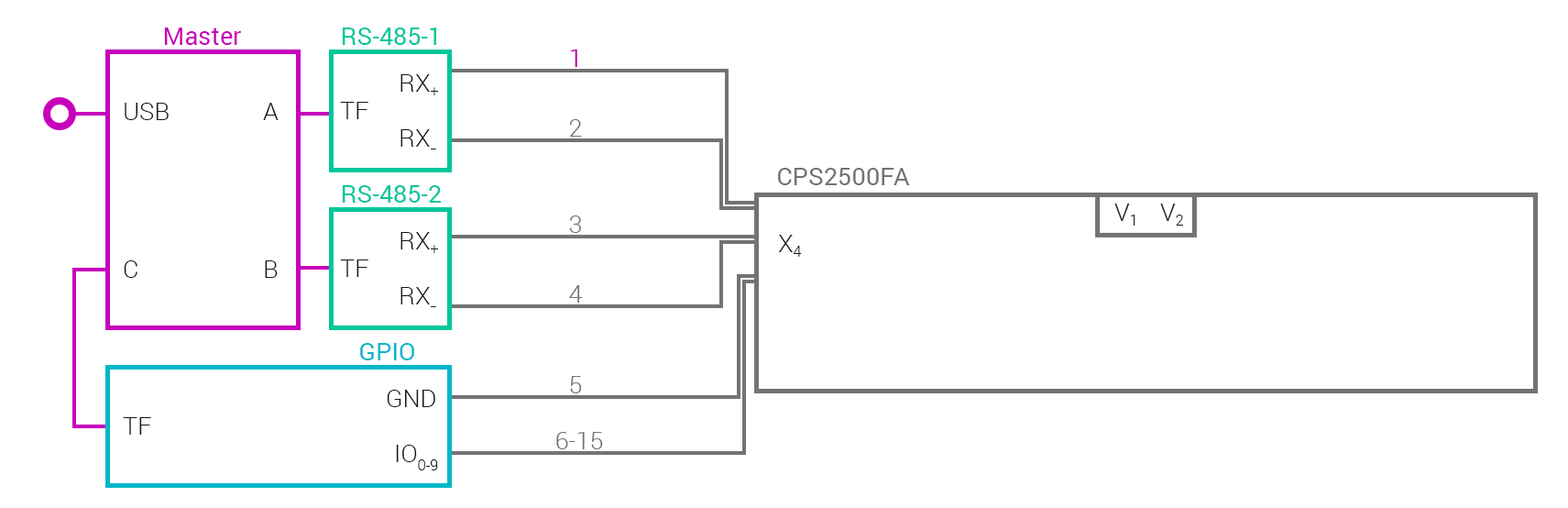
<style>
.page{position:relative;width:1568px;height:508px;background:#ffffff}
.page>*{position:absolute;margin:0}
.t1{font:24.9px "Roboto-Regular";color:#c700bb}
.t2{font:24.9px "Roboto-Regular";color:#00c79b}
.t3{font:24.9px "Roboto-Light";color:#c700bb}
.t4{font:24.8px "Roboto-Light";color:#181818}
.t5{font:24.9px "Roboto-Light";color:#737373}
.t6{font:38.2px "Roboto-Light";color:#181818}
.t7{font:24.9px "Roboto-Regular";color:#737373}
.t8{font:24.9px "Roboto-Regular";color:#01b7c7}
</style>
<div class="page">
<p class="t1" style="left:164px;top:27px;width:77px;height:18px">Master</p>
<p class="t2" style="left:342px;top:27px;width:94px;height:18px">RS-485-1</p>
<p class="t3" style="left:570px;top:49px;width:7px;height:18px">1</p>
<p class="t3" style="left:570px;top:49px;width:7px;height:18px">1</p>
<p class="t4" style="left:400px;top:74px;width:38px;height:21px">RX+</p>
<p class="t4" style="left:340px;top:102px;width:28px;height:17px">TF</p>
<p class="t4" style="left:125px;top:103px;width:44px;height:17px">USB</p>
<p class="t4" style="left:263px;top:103px;width:16px;height:17px">A</p>
<p class="t5" style="left:569px;top:119px;width:13px;height:18px">2</p>
<p class="t4" style="left:400px;top:129px;width:36px;height:20px">RX<span class="t6">-</span></p>
<p class="t7" style="left:778px;top:168px;width:132px;height:17px">CPS2500FA</p>
<p class="t2" style="left:342px;top:185px;width:99px;height:18px">RS-485-2</p>
<p class="t4" style="left:1114px;top:203px;width:21px;height:22px">V1</p>
<p class="t4" style="left:1160px;top:203px;width:23px;height:22px">V2</p>
<p class="t5" style="left:569px;top:215px;width:12px;height:18px">3</p>
<p class="t4" style="left:400px;top:232px;width:38px;height:21px">RX+</p>
<p class="t4" style="left:778px;top:235px;width:24px;height:22px">X4</p>
<p class="t4" style="left:124px;top:260px;width:13px;height:18px">C</p>
<p class="t4" style="left:265px;top:260px;width:13px;height:18px">B</p>
<p class="t4" style="left:340px;top:259px;width:28px;height:18px">TF</p>
<p class="t4" style="left:400px;top:287px;width:36px;height:20px">RX<span class="t6">-</span></p>
<p class="t5" style="left:569px;top:285px;width:14px;height:17px">4</p>
<p class="t8" style="left:360px;top:343px;width:54px;height:17px">GPIO</p>
<p class="t5" style="left:570px;top:376px;width:12px;height:17px">5</p>
<p class="t4" style="left:387px;top:389px;width:48px;height:18px">GND</p>
<p class="t4" style="left:123px;top:417px;width:28px;height:17px">TF</p>
<p class="t5" style="left:556px;top:432px;width:47px;height:17px">6-15</p>
<p class="t4" style="left:396px;top:444px;width:42px;height:26px">IO0-9</p>
</div>
